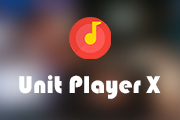
<style>
.page{position:relative;width:180px;height:120px}
.page>*{position:absolute;margin:0}
.t1{font:25.2px "STHupo";color:#ffffff}
</style>
<div class="page">
<p class="t1" style="left:19px;top:75px;width:142px;height:24px">Unit Player X</p>
</div>
